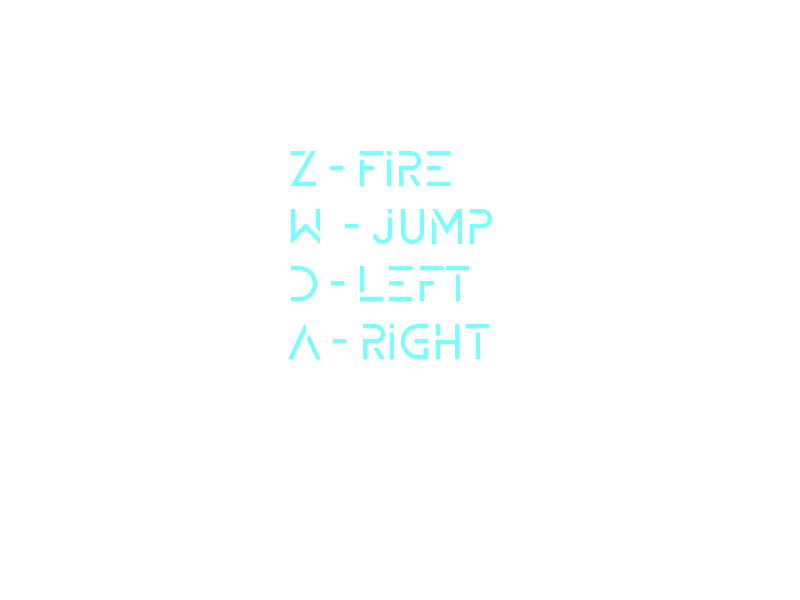
<style>
.page{position:relative;width:800px;height:600px;background:#ffffff}
.page>*{position:absolute;margin:0}
.t1{font:48px "ZELDA";color:#7afefc}
</style>
<div class="page">
<p class="t1" style="left:288px;top:151px;width:204px;height:208px">Z - Fire<br>W  - jump<br>d - Left<br>A - right</p>
</div>
